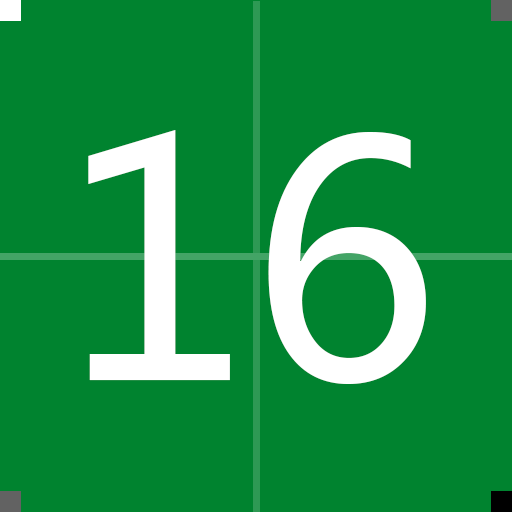
<style>
.page{position:relative;width:512px;height:512px;background:#00832f}
.page>*{position:absolute;margin:0}
.t1{font:323.1px "MicrosoftYaHei";color:#ffffff}
</style>
<div class="page">
<p class="t1" style="left:88px;top:130px;width:338px;height:254px">16</p>
</div>
